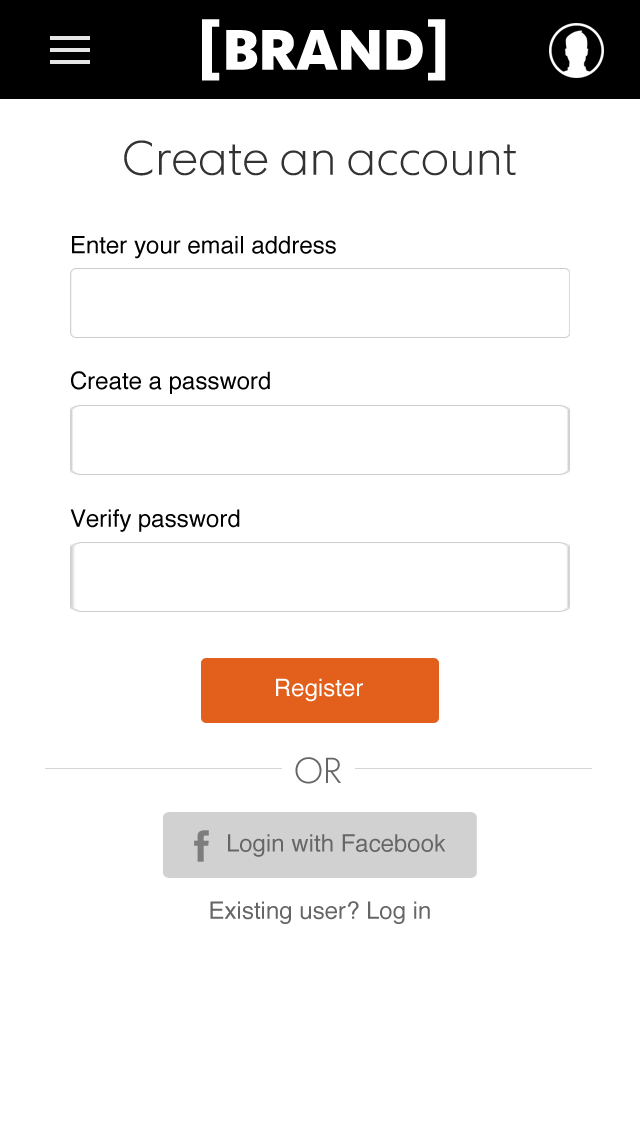
<style>
.page{position:relative;width:640px;height:1136px;background:#ffffff}
.page>*{position:absolute;margin:0}
.t1{font:56.6px "FuturaTodayScreen-Bold";color:#ffffff}
.t2{font:72px "FuturaTodayScreen-Bold";color:#ffffff}
.t3{font:48px "FuturaTodayScreen-Light";color:#333333}
.t4{font:24px "Helvetica";color:#000000}
.t5{font:24px "Helvetica";color:#ffffff}
.t6{font:36px "FuturaTodayScreen-Light";color:#666666}
.t7{font:24px "Helvetica";color:#666666}
</style>
<div class="page">
<p class="t1" style="left:202px;top:19px;width:244px;height:62px"><span class="t2">[</span>BRAND<span class="t2">]</span></p>
<p class="t3" style="left:124px;top:140px;width:392px;height:36px">Create an account</p>
<p class="t4" style="left:72px;top:236px;width:264px;height:23px">Enter your email address</p>
<p class="t4" style="left:71px;top:371px;width:199px;height:23px">Create a password</p>
<p class="t4" style="left:70px;top:509px;width:170px;height:23px">Verify password</p>
<p class="t5" style="left:276px;top:678px;width:87px;height:24px">Register</p>
<p class="t6" style="left:295px;top:757px;width:46px;height:27px">OR</p>
<p class="t7" style="left:228px;top:834px;width:218px;height:23px">Login with Facebook</p>
<p class="t7" style="left:210px;top:901px;width:220px;height:23px">Existing user? Log in</p>
</div>
